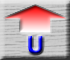
<style>
.page{position:relative;width:70px;height:60px}
.page>*{position:absolute;margin:0}
.t1{font:24px "Arial-BoldMT"}
</style>
<div class="page">
<p class="t1" style="left:28px;top:36px;width:15px;height:18px">U</p>
</div>
